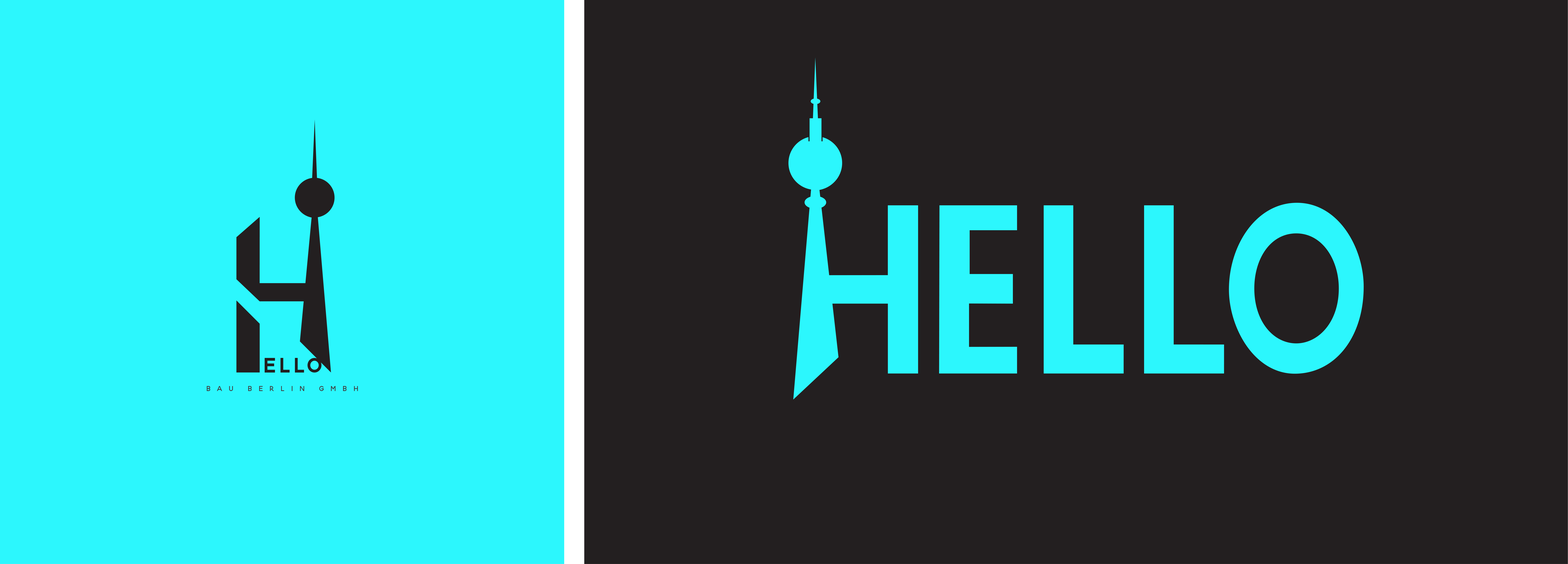
<style>
.page{position:relative;width:1568px;height:564px;background:#231f20}
.page>*{position:absolute;margin:0}
.t1{font:36.1px "BloomingElegantSans-Bold";letter-spacing:0.075em;color:#231f20}
.t2{font:12.6px "BloomingElegantSans";letter-spacing:0.5em;color:#414042}
</style>
<div class="page">
<p class="t1" style="left:265px;top:358px;width:57px;height:15px">ELLO</p>
<p class="t2" style="left:207px;top:386px;width:151px;height:5px">BAU BERLIN GMBH</p>
</div>
